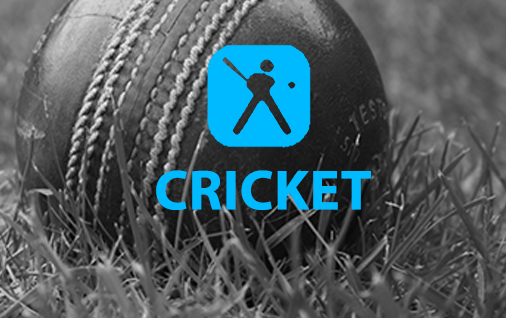
<style>
.page{position:relative;width:506px;height:318px}
.page>*{position:absolute;margin:0}
.t1{font:56.8px "MyriadPro-Bold";letter-spacing:0.01em;color:#00baff}
</style>
<div class="page">
<p class="t1" style="left:156px;top:170px;width:215px;height:40px">CRICKET</p>
</div>
